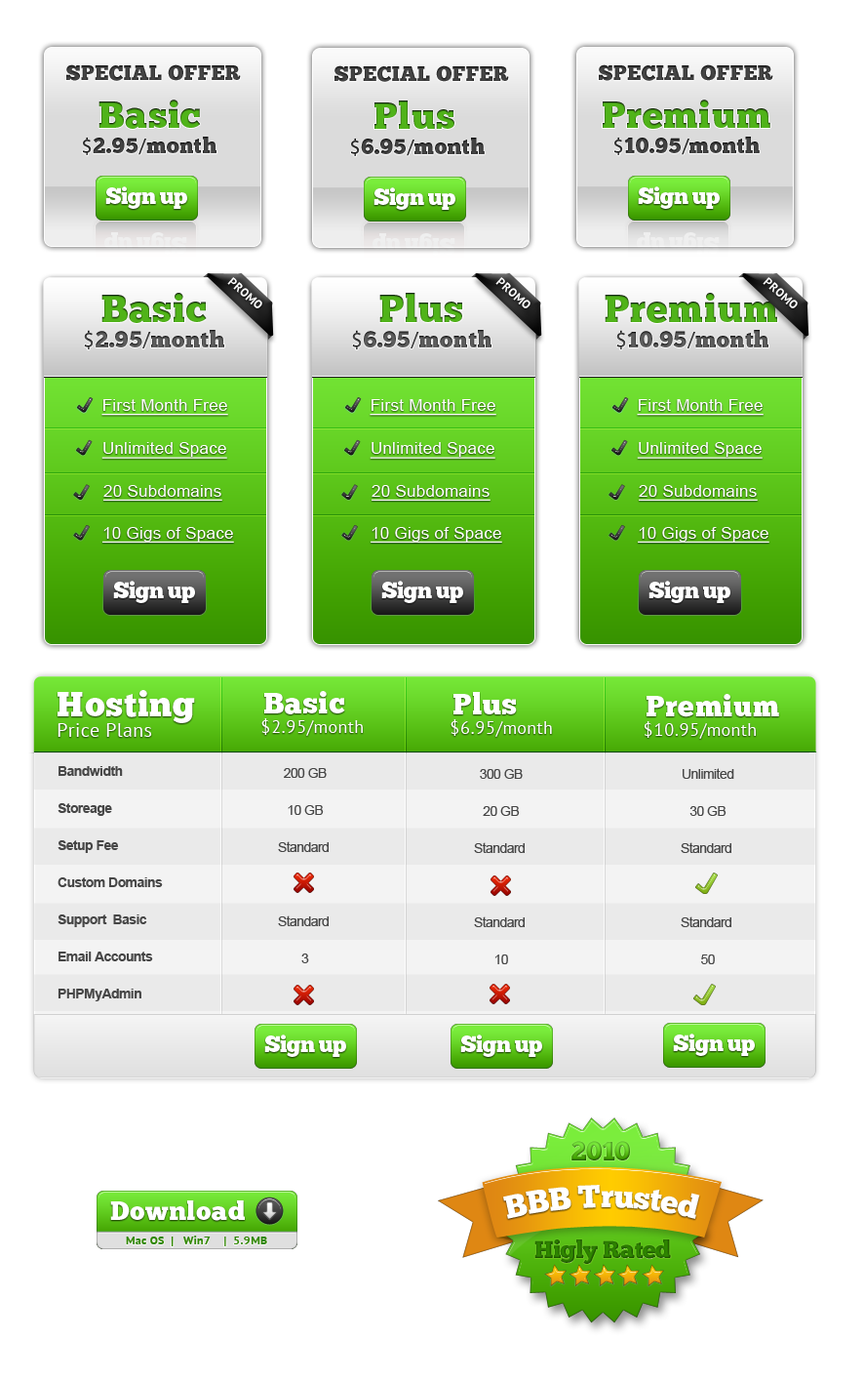
<style>
.page{position:relative;width:864px;height:1380px;background:#ffffff}
.page>*{position:absolute;margin:0}
.t1{font:20.8px "ChunkFive";letter-spacing:0.02em;color:#3e3e3e}
.t2{font:37.5px "ChunkFive";letter-spacing:0.02em;color:#50b319}
.t3{font:21.8px "ChunkFive";letter-spacing:0.02em;color:#3d3d3d}
.t4{font:21.8px "MyriadPro-Regular";letter-spacing:0.02em;color:#3d3d3d}
.t5{font:21.8px "ChunkFive";letter-spacing:0.02em;color:#3e3e3e}
.t6{font:21.8px "MyriadPro-Regular";letter-spacing:0.02em;color:#3e3e3e}
.t7{font:22.9px "ChunkFive";letter-spacing:-0.04em;color:#fafafa}
.t8{font:12.2px "PTSans-Bold";letter-spacing:0.02em;color:#fefefe}
.t9{font:38.6px "ChunkFive";letter-spacing:0.02em;color:#50b319}
.t10{font:22.7px "ChunkFive";letter-spacing:0.02em;color:#575757}
.t11{font:22.7px "MyriadPro-Regular";letter-spacing:0.02em;color:#575757}
.t12{font:22.7px "ChunkFive";letter-spacing:0.02em;color:#585858}
.t13{font:22.7px "MyriadPro-Regular";letter-spacing:0.02em;color:#585858}
.t14{font:16.4px "ArialMT";letter-spacing:0.02em;color:#ffffff;text-decoration:underline}
.t15{font:35px "ChunkFive";letter-spacing:0.02em;color:#ffffff}
.t16{font:29.8px "ChunkFive";letter-spacing:0.02em;color:#ffffff}
.t17{font:19.4px "PTSans-Regular";letter-spacing:0.02em;color:#ffffff}
.t18{font:17.6px "PTSans-Regular";letter-spacing:0.02em;color:#ffffff}
.t19{font:13.7px/37.1px "Arial-BoldMT";letter-spacing:-0.04em;color:#464646}
.t20{font:13.7px/37.1px "ArialMT";letter-spacing:-0.04em;color:#464646}
.t21{font:26.9px "ChunkFive";letter-spacing:-0.02em}
.t22{font:32.2px "ChunkFive";letter-spacing:-0.02em;color:#ffffff}
.t23{font:26.4px "ChunkFive";letter-spacing:0.02em;color:#fafafa}
.t24{font:11.7px "PTSans-Bold";letter-spacing:0.02em;color:#2f8700}
.t25{font:24.5px "ChunkFive";letter-spacing:-0.02em;color:#2a7900}
</style>
<div class="page">
<p class="t1" style="left:66px;top:64px;width:175px;height:17px">SPECIAL OFFER</p>
<p class="t1" style="left:335px;top:65px;width:174px;height:17px">SPECIAL OFFER</p>
<p class="t1" style="left:599px;top:64px;width:175px;height:17px">SPECIAL OFFER</p>
<p class="t2" style="left:99px;top:100px;width:102px;height:29px">Basic</p>
<p class="t2" style="left:375px;top:100px;width:80px;height:29px">Plus</p>
<p class="t2" style="left:603px;top:100px;width:168px;height:29px">Premium</p>
<p class="t3" style="left:83px;top:137px;width:134px;height:18px"><span class="t4">$</span>2.95<span class="t4">/</span>month</p>
<p class="t5" style="left:351px;top:138px;width:134px;height:18px"><span class="t6">$</span>6.95<span class="t6">/</span>month</p>
<p class="t5" style="left:615px;top:137px;width:145px;height:18px"><span class="t6">$</span>10.95<span class="t6">/</span>month</p>
<p class="t7" style="left:105px;top:186px;width:82px;height:23px">Sign up</p>
<p class="t7" style="left:374px;top:187px;width:82px;height:23px">Sign up</p>
<p class="t7" style="left:638px;top:186px;width:82px;height:23px">Sign up</p>
<p class="t8" style="left:227px;top:277px;width:35px;height:31px;rotate:42deg">PROMO</p>
<p class="t8" style="left:496px;top:277px;width:35px;height:31px;rotate:42deg">PROMO</p>
<p class="t8" style="left:763px;top:277px;width:35px;height:31px;rotate:42deg">PROMO</p>
<p class="t9" style="left:101px;top:293px;width:106px;height:30px">Basic</p>
<p class="t9" style="left:380px;top:293px;width:82px;height:29px">Plus</p>
<p class="t9" style="left:605px;top:293px;width:173px;height:30px">Premium</p>
<p class="t10" style="left:84px;top:330px;width:140px;height:20px"><span class="t11">$</span>2.95<span class="t11">/</span>month</p>
<p class="t12" style="left:352px;top:330px;width:140px;height:20px"><span class="t13">$</span>6.95<span class="t13">/</span>month</p>
<p class="t12" style="left:617px;top:330px;width:152px;height:20px"><span class="t13">$</span>10.95<span class="t13">/</span>month</p>
<p class="t14" style="left:101px;top:399px;width:127px;height:17px">First Month Free</p>
<p class="t14" style="left:370px;top:399px;width:127px;height:17px">First Month Free</p>
<p class="t14" style="left:637px;top:399px;width:127px;height:17px">First Month Free</p>
<p class="t14" style="left:101px;top:442px;width:126px;height:17px">Unlimited Space</p>
<p class="t14" style="left:370px;top:442px;width:126px;height:17px">Unlimited Space</p>
<p class="t14" style="left:637px;top:442px;width:126px;height:17px">Unlimited Space</p>
<p class="t14" style="left:103px;top:485px;width:119px;height:15px">20 Subdomains</p>
<p class="t14" style="left:372px;top:485px;width:119px;height:15px">20 Subdomains</p>
<p class="t14" style="left:639px;top:485px;width:119px;height:15px">20 Subdomains</p>
<p class="t14" style="left:102px;top:527px;width:132px;height:15px">10 Gigs of Space</p>
<p class="t14" style="left:371px;top:527px;width:131px;height:15px">10 Gigs of Space</p>
<p class="t14" style="left:638px;top:527px;width:132px;height:15px">10 Gigs of Space</p>
<p class="t7" style="left:113px;top:580px;width:82px;height:23px">Sign up</p>
<p class="t7" style="left:381px;top:580px;width:82px;height:23px">Sign up</p>
<p class="t7" style="left:649px;top:580px;width:82px;height:23px">Sign up</p>
<p class="t15" style="left:58px;top:690px;width:137px;height:33px">Hosting</p>
<p class="t16" style="left:264px;top:691px;width:81px;height:23px">Basic</p>
<p class="t16" style="left:454px;top:692px;width:63px;height:22px">Plus</p>
<p class="t16" style="left:647px;top:694px;width:133px;height:23px">Premium</p>
<p class="t17" style="left:58px;top:723px;width:94px;height:14px">Price Plans</p>
<p class="t18" style="left:261px;top:718px;width:102px;height:18px">$2.95/month</p>
<p class="t18" style="left:451px;top:719px;width:101px;height:18px">$6.95/month</p>
<p class="t18" style="left:644px;top:721px;width:112px;height:18px">$10.95/month</p>
<p class="t19" style="left:58px;top:766px;width:105px;height:235px">Bandwidth<br>Storeage<br>Setup Fee<br>Custom Domains<br>Support  Basic<br>Email Accounts<br>PHPMyAdmin</p>
<p class="t20" style="left:278px;top:768px;width:51px;height:195px;text-align:center">200 GB<br>10 GB<br>Standard <br><br>Standard <br>3</p>
<p class="t20" style="left:474px;top:769px;width:51px;height:195px;text-align:center">300 GB<br>20 GB<br>Standard <br><br>Standard <br>10</p>
<p class="t20" style="left:681px;top:768px;width:54px;height:196px;text-align:center">Unlimited<br>30 GB<br>Standard <br><br>Standard <br>50</p>
<p class="t7" style="left:264px;top:1034px;width:82px;height:23px">Sign up</p>
<p class="t7" style="left:460px;top:1034px;width:82px;height:23px">Sign up</p>
<p class="t7" style="left:673px;top:1033px;width:82px;height:23px">Sign up</p>
<p class="t21" style="left:572px;top:1140px;width:58px;height:20px">2010</p>
<p class="t22" style="left:503px;top:1184px;width:197px;height:35px">BBB Trusted</p>
<p class="t23" style="left:110px;top:1200px;width:135px;height:20px">Download</p>
<p class="t24" style="left:126px;top:1235px;width:141px;height:11px">Mac OS  |   Win7    |  5.9MB</p>
<p class="t25" style="left:535px;top:1239px;width:136px;height:24px">Higly Rated</p>
</div>
